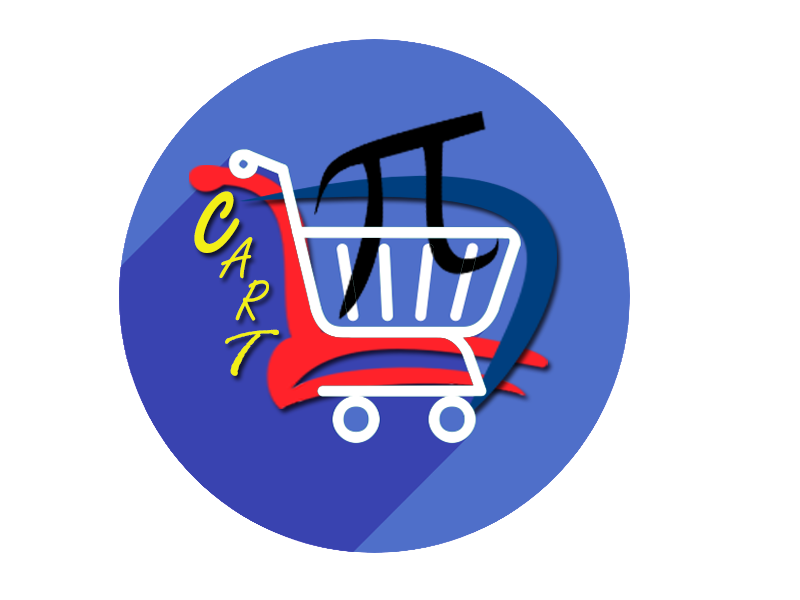
<style>
.page{position:relative;width:800px;height:600px;background:#ffffff}
.page>*{position:absolute;margin:0}
.t1{font:188.2px "FreestyleScript-Regular";color:#f2ef17}
.t2{font:60px "FreestyleScript-Regular";letter-spacing:0.1em;color:#f2ef17}
.t3{font:60px "FreestyleScript-Regular";color:#f2ef17}
.t4{font:67.4px "RageItalic";color:#f2ef17;scale:1.17 1}
</style>
<div class="page">
<p class="t1" style="left:194px;top:191px;width:46px;height:62px;rotate:-6deg">c</p>
<p class="t2" style="left:219px;top:237px;width:34px;height:42px">A</p>
<p class="t3" style="left:235px;top:279px;width:34px;height:42px">R</p>
<p class="t4" style="left:225px;top:329px;width:54px;height:47px">T</p>
</div>
